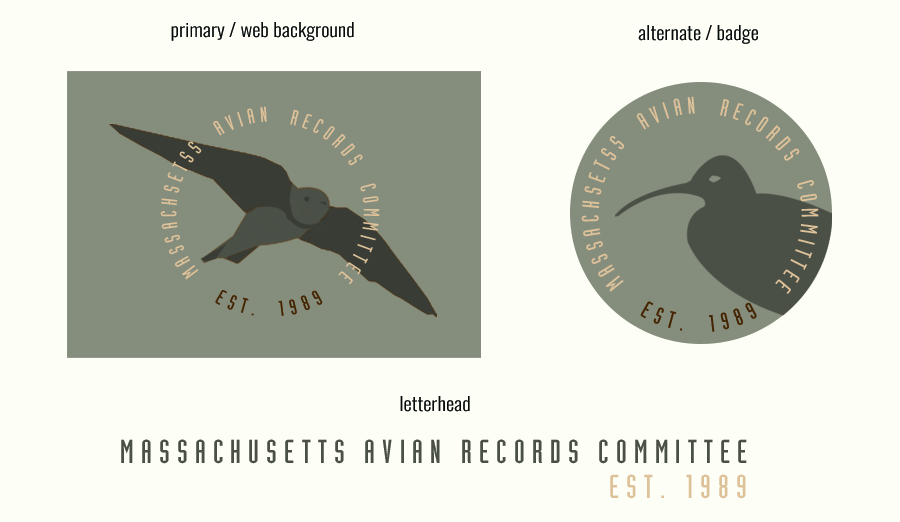
<style>
.page{position:relative;width:900px;height:522px;background:#fdfff6}
.page>*{position:absolute;margin:0}
.t1{font:18.5px "Oswald-Light";color:#080a0a;scale:1.11 1}
.t2{font:23.5px/5.8px "Industria-Solid";letter-spacing:0.2em;color:#ddc199;scale:1.11 1}
.t3{font:23.5px/5.8px "Industria-Solid";letter-spacing:0.2em;color:#ddc199;font-variant:small-caps;scale:1.11 1}
.t4{font:21px/5.2px "Industria-Solid";letter-spacing:0.2em;color:#ddc199;scale:1.15 1}
.t5{font:21px/5.2px "Industria-Solid";letter-spacing:0.2em;color:#ddc199;font-variant:small-caps;scale:1.15 1}
.t6{font:21px "Industria-Solid";letter-spacing:0.2em;color:#412505;scale:1.15 1}
.t7{font:23.5px "Industria-Solid";letter-spacing:0.2em;color:#412505;scale:1.11 1}
.t8{font:32.7px "Industria-Solid";letter-spacing:0.2em;color:#4a5046;scale:1.11 1}
.t9{font:32.7px "Industria-Solid";letter-spacing:0.2em;color:#ddc199;scale:1.11 1}
</style>
<div class="page">
<p class="t1" style="left:171px;top:22px;width:183px;height:19px">primary / web background</p>
<p class="t1" style="left:638px;top:25px;width:120px;height:19px">alternate / badge</p>
<p class="t2" style="left:581px;top:96px;width:238px;height:198px;text-align:right"><span class="t3">MA</span>SSACHSETSS  AVIAN  RECORDS  COMMITTEE</p>
<p class="t4" style="left:160px;top:106px;width:220px;height:179px;text-align:right"><span class="t5">MA</span>SSACHSETSS  AVIAN  RECORDS  COMMITTEE</p>
<p class="t6" style="left:215px;top:290px;width:108px;height:26px">EST.  1989</p>
<p class="t7" style="left:640px;top:301px;width:117px;height:31px">EST.  1989</p>
<p class="t1" style="left:400px;top:396px;width:70px;height:16px">letterhead</p>
<p class="t8" style="left:121px;top:439px;width:626px;height:25px">MASSACHUSETTS AVIAN RECORDS COMMITTEE</p>
<p class="t9" style="left:610px;top:474px;width:136px;height:25px">EST. 1989</p>
</div>
